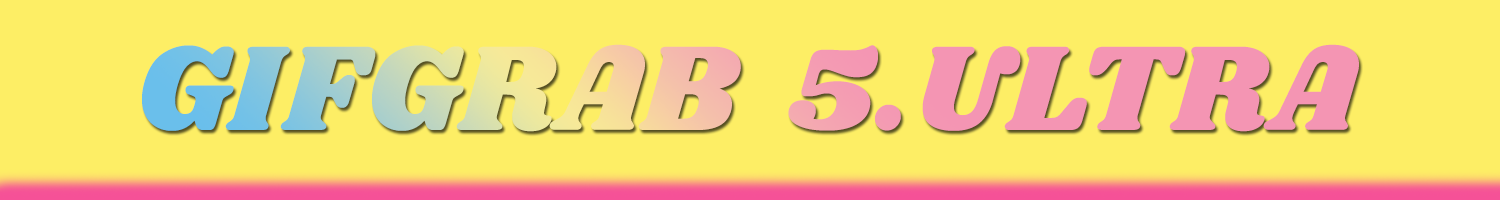
<style>
.page{position:relative;width:1500px;height:200px;background:#fdee65}
.page>*{position:absolute;margin:0}
.t1{font:125px "Shrikhand-Regular";letter-spacing:0.005em}
</style>
<div class="page">
<p class="t1" style="left:141px;top:44px;width:1218px;height:88px">GIFGRAB  5.ULTRA</p>
</div>
